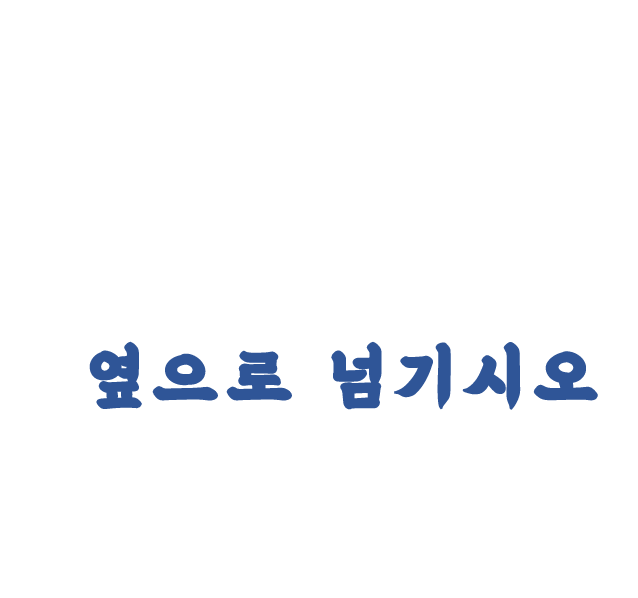
<style>
.page{position:relative;width:638px;height:598px;background:#ffffff}
.page>*{position:absolute;margin:0}
.t1{font:72px "BMEULJIROTTF";letter-spacing:0.1em;color:#2f5597;font-weight:bold}
</style>
<div class="page">
<p class="t1" style="left:89px;top:341px;width:509px;height:69px">옆으로 넘기시오</p>
</div>
